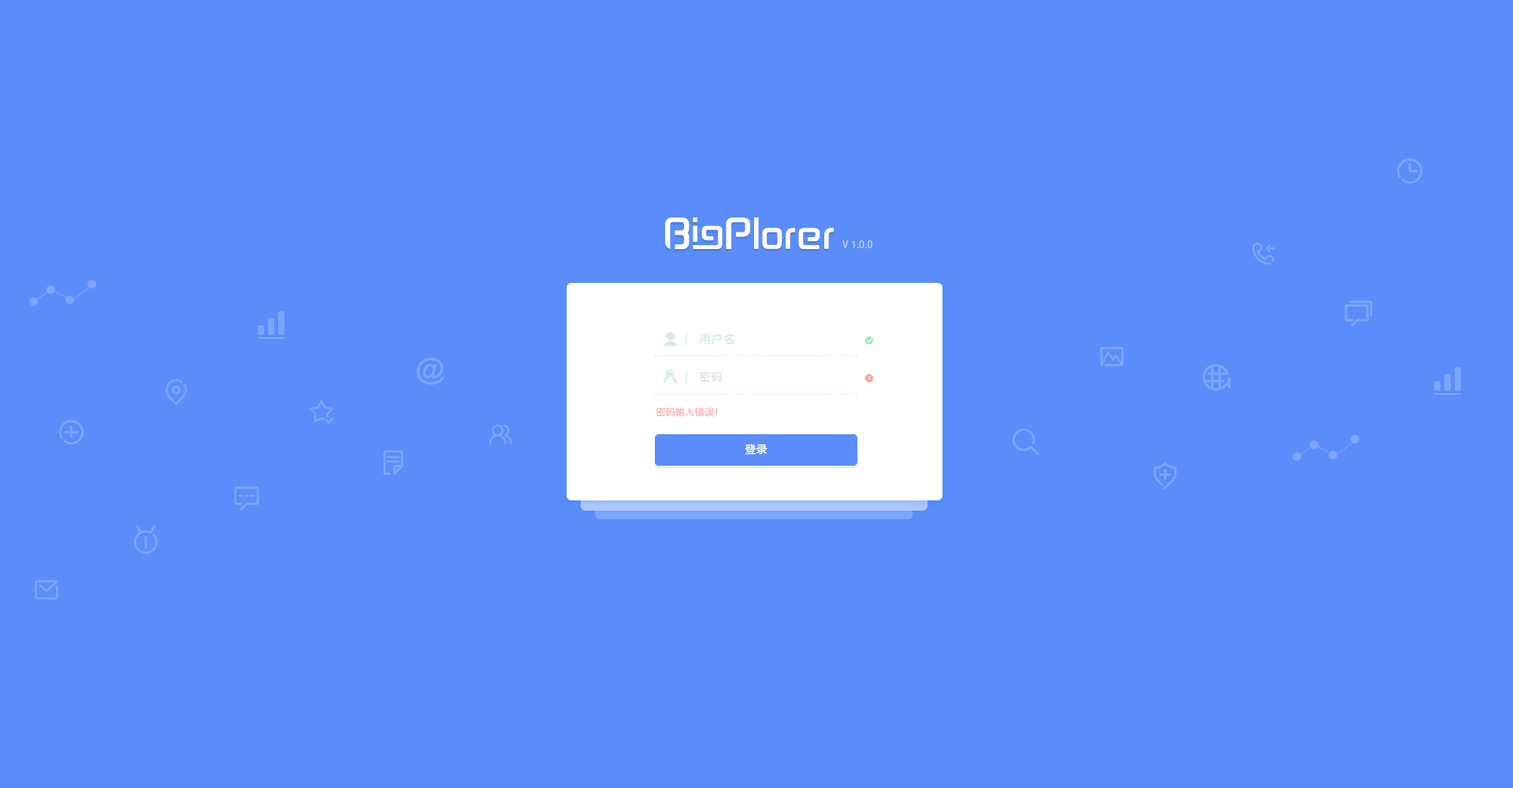
<style>
.page{position:relative;width:1513px;height:788px;background:#5a8dfa}
.page>*{position:absolute;margin:0}
.t1{font:9.5px "AdobeHeitiStd-Regular";letter-spacing:0.025em;color:#b9cbfd;text-transform:uppercase}
.t2{font:11px "FZLTXHK--GBK1-0";letter-spacing:0.1em;color:#cbdee3;text-transform:uppercase}
.t3{font:4.7px "FZLTXHK--GBK1-0";letter-spacing:0.025em;text-transform:uppercase}
.t4{font:9.5px "FZLTXHK--GBK1-0";letter-spacing:0.025em;color:#ff959a;text-transform:uppercase}
.t5{font:11px "FZLTZHK--GBK1-0";letter-spacing:0.025em;color:#ffffff;text-transform:uppercase}
</style>
<div class="page">
<p class="t1" style="left:842px;top:240px;width:30px;height:8px">v 1.0.0</p>
<p class="t2" style="left:700px;top:333px;width:34px;height:11px">用户名</p>
<p class="t2" style="left:699px;top:371px;width:23px;height:11px">密码</p>
<p class="t3" style="left:868px;top:376px;width:4px;height:5px">x</p>
<p class="t4" style="left:656px;top:407px;width:61px;height:10px">密码输入错误！</p>
<p class="t5" style="left:745px;top:444px;width:23px;height:11px">登录</p>
</div>
